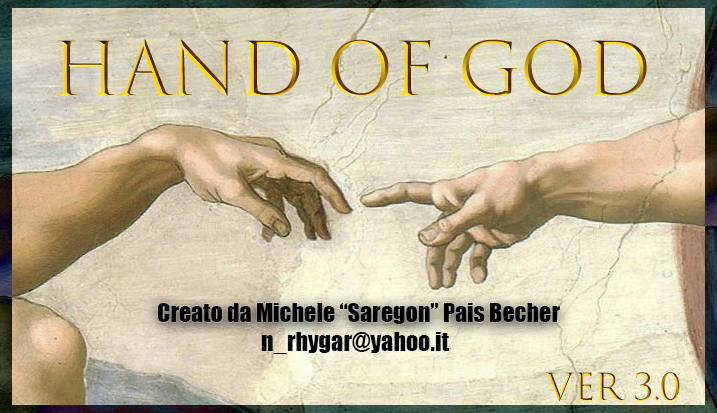
<style>
.page{position:relative;width:717px;height:413px}
.page>*{position:absolute;margin:0}
.t1{font:72px "TrajanColor-Concept"}
.t2{font:24px "Impact";color:#000000}
.t3{font:36px "TrajanColor-Concept"}
</style>
<div class="page">
<p class="t1" style="left:57px;top:39px;width:590px;height:58px">Hand OF God</p>
<p class="t2" style="left:157px;top:303px;width:403px;height:21px">Creato da Michele “Saregon” Pais Becher</p>
<p class="t2" style="left:261px;top:332px;width:188px;height:22px">n_rhygar@yahoo.it</p>
<p class="t3" style="left:545px;top:372px;width:135px;height:29px">Ver 3.0</p>
</div>
